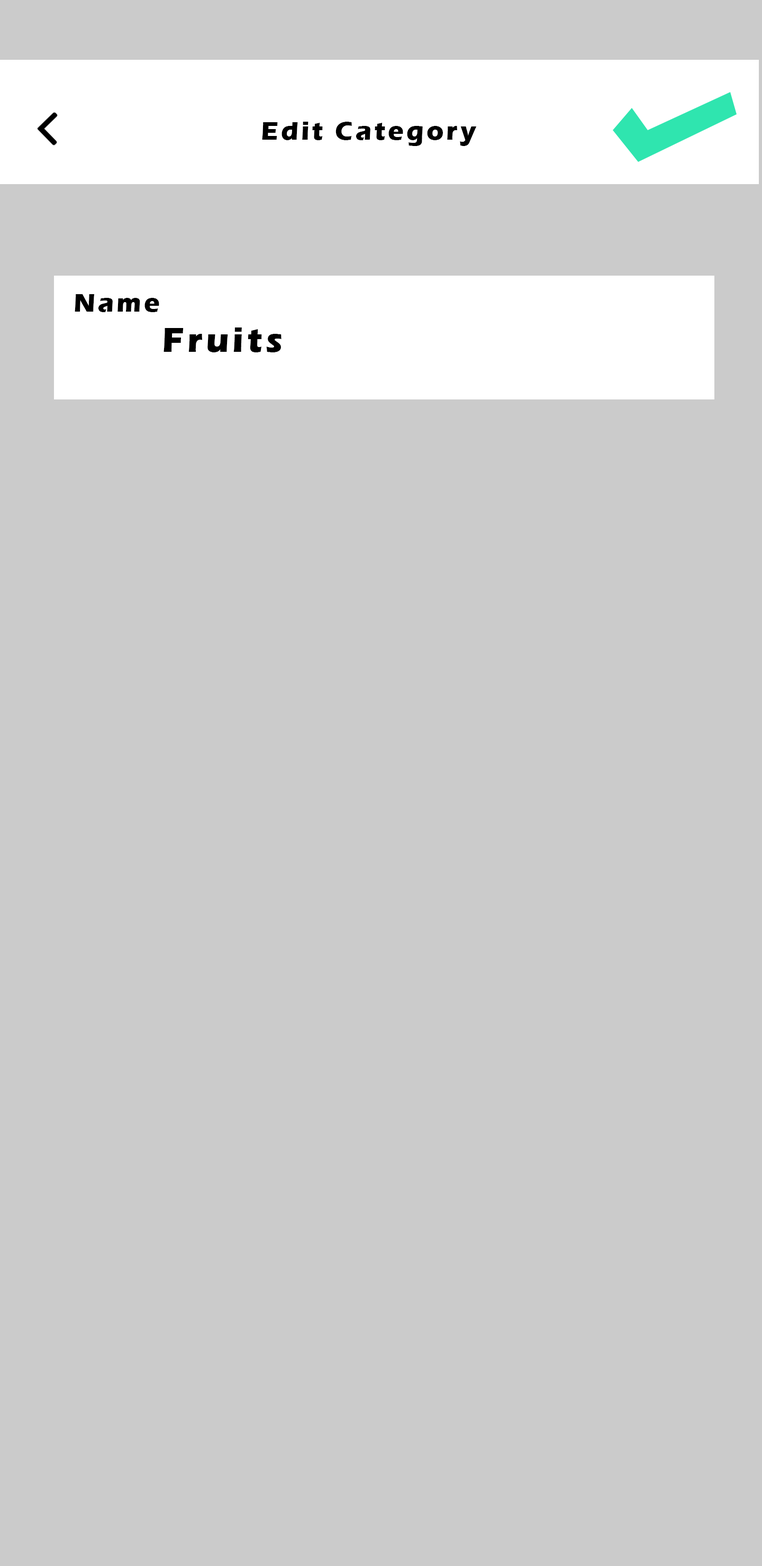
<style>
.page{position:relative;width:762px;height:1566px;background:#cbcbcb}
.page>*{position:absolute;margin:0}
.t1{font:26.4px "ErasITC-Bold";letter-spacing:0.1em;color:#000000}
.t2{font:35.3px "ErasITC-Bold";letter-spacing:0.1em;color:#000000}
</style>
<div class="page">
<p class="t1" style="left:262px;top:122px;width:215px;height:24px">Edit Category</p>
<p class="t1" style="left:75px;top:294px;width:84px;height:18px">Name</p>
<p class="t2" style="left:163px;top:327px;width:118px;height:25px">Fruits</p>
</div>
